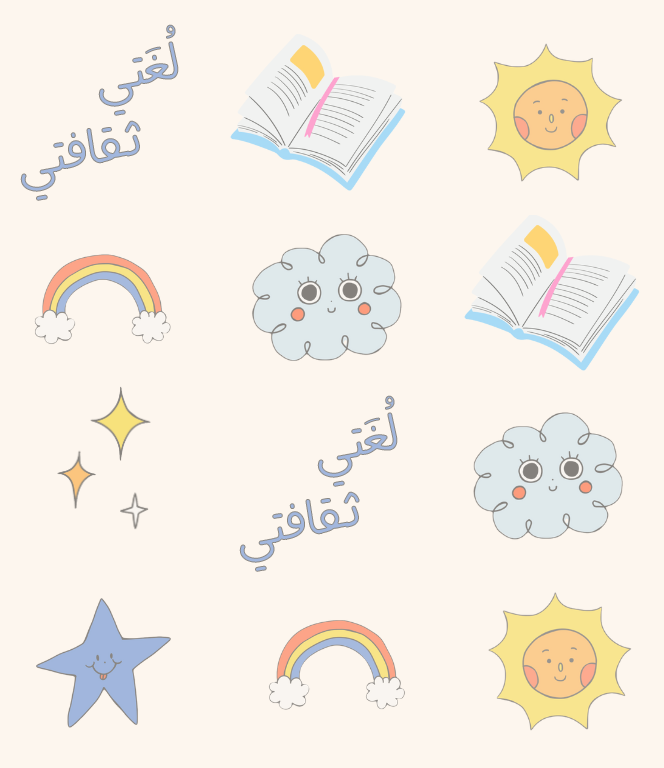
<style>
.page{position:relative;width:664px;height:768px;background:#fdf6ee}
.page>*{position:absolute;margin:0}
.t1{font:64px "Dongol-Regular"}
.t2{font:64px "Dongol-Regular";color:#a1b6dd}
</style>
<div class="page">
<p class="t1" style="left:98px;top:24px;width:81px;height:92px;rotate:-11deg">لُغَتي</p>
<p class="t2" style="left:20px;top:120px;width:121px;height:81px;rotate:-11deg">ثقافتي</p>
<p class="t1" style="left:317px;top:395px;width:81px;height:92px;rotate:-11deg">لُغَتي</p>
<p class="t2" style="left:239px;top:491px;width:121px;height:81px;rotate:-11deg">ثقافتي</p>
</div>
